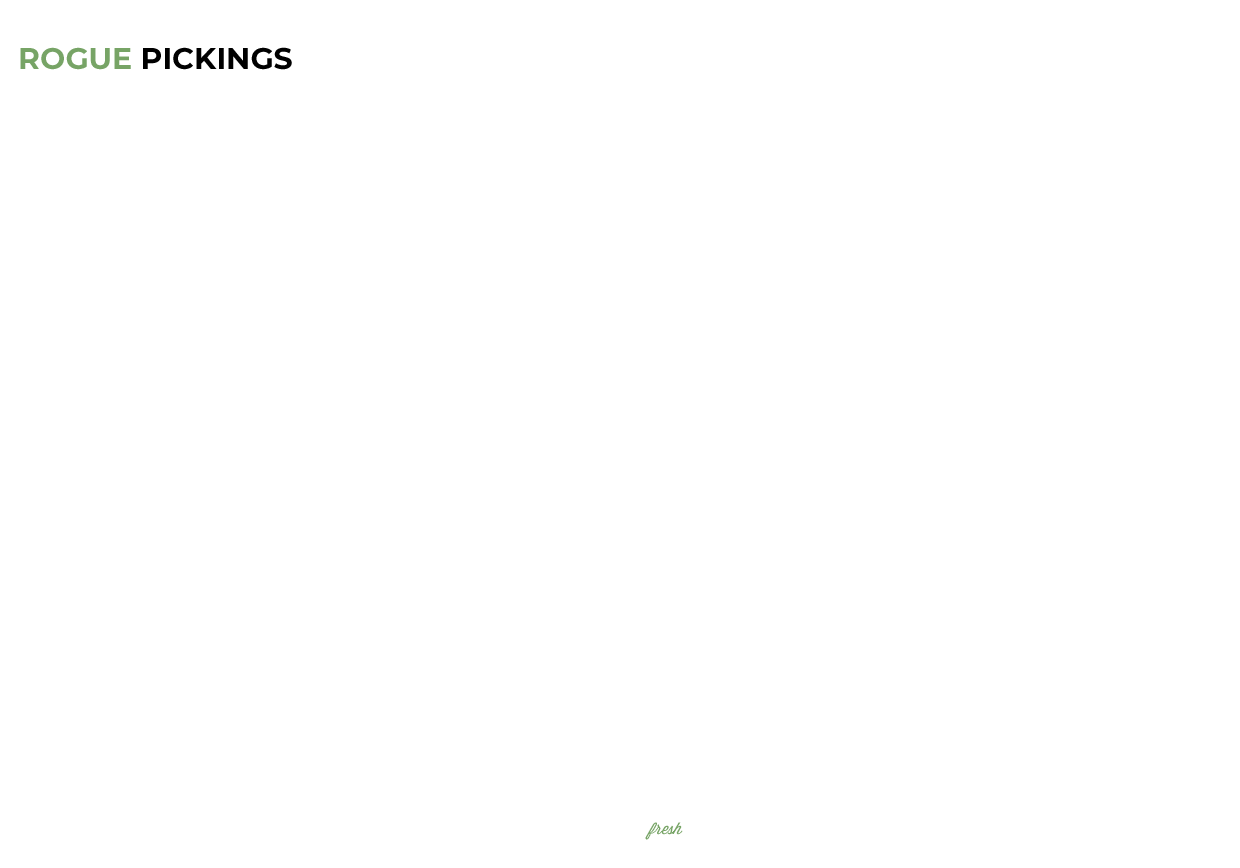
<style>
.page{position:relative;width:1240px;height:868px;background:#ffffff}
.page>*{position:absolute;margin:0}
.t1{font:30px "Montserrat-Bold";color:#000000;text-transform:uppercase}
.t2{font:30px "Montserrat-Bold";color:#77a466;text-transform:uppercase}
.t3{font:16px "Wisdom-Script";color:#77a466}
</style>
<div class="page">
<p class="t1" style="left:20px;top:47px;width:272px;height:23px"><span class="t2">Rogue </span>Pickings</p>
<p class="t3" style="left:645px;top:822px;width:38px;height:18px">fresh</p>
</div>
